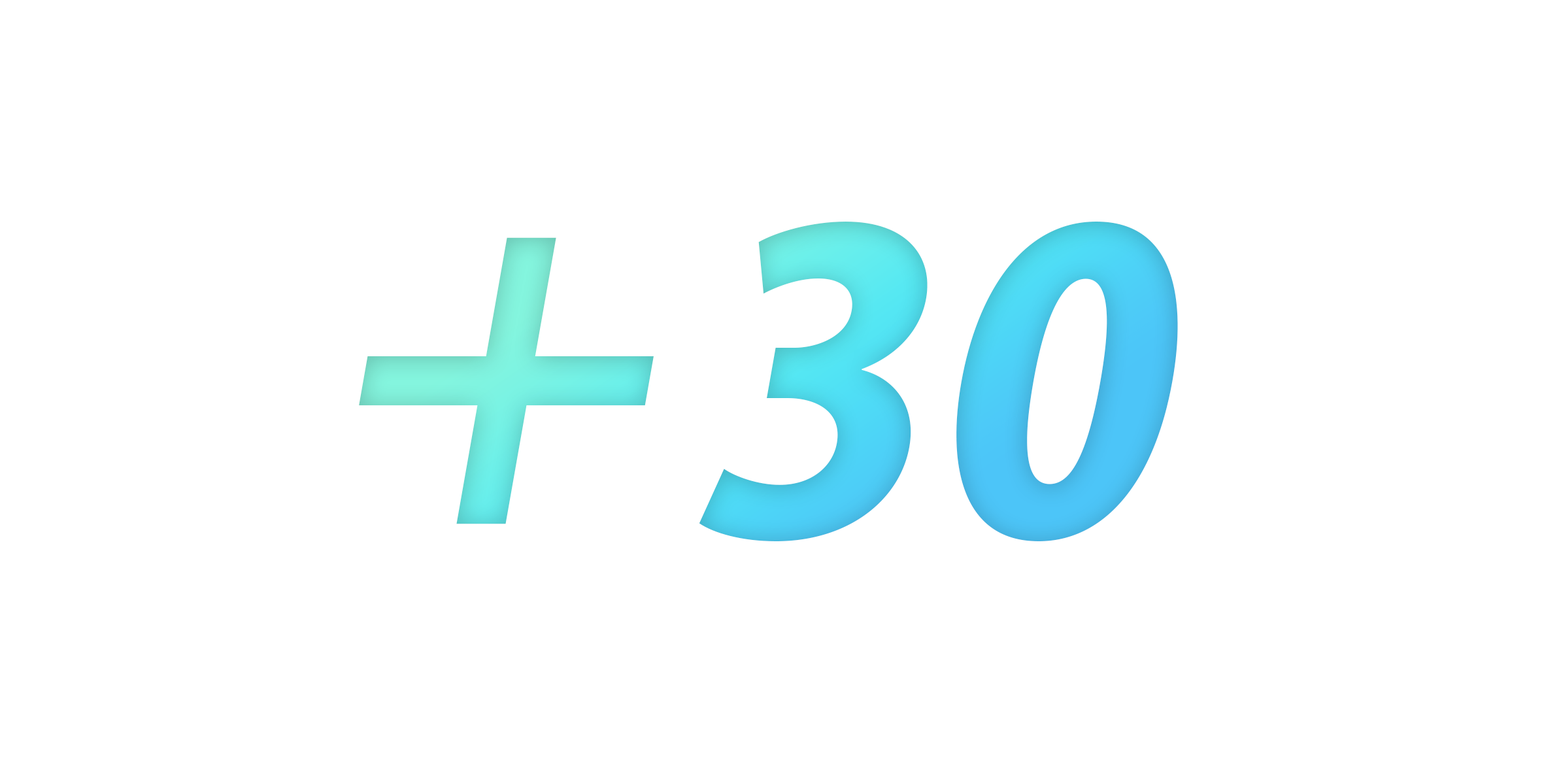
<style>
.page{position:relative;width:1544px;height:772px;background:#ffffff}
.page>*{position:absolute;margin:0}
.t1{font:408.6px "KozGoPro-Heavy";font-style:italic}
</style>
<div class="page">
<p class="t1" style="left:359px;top:222px;width:819px;height:319px">＋30</p>
</div>
